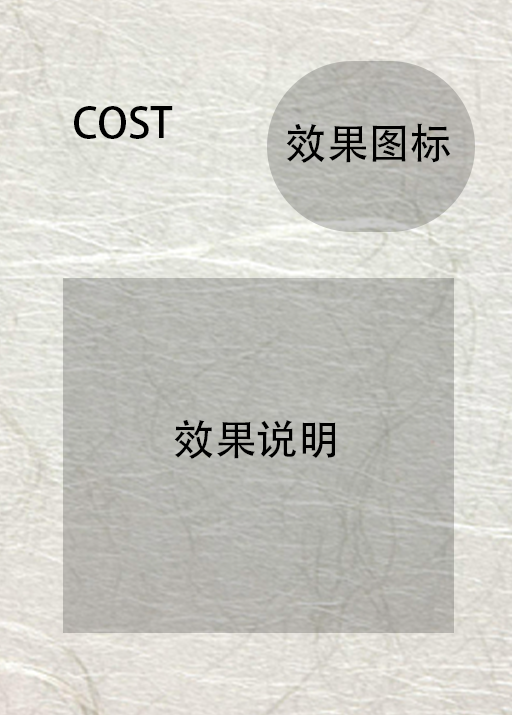
<style>
.page{position:relative;width:512px;height:715px}
.page>*{position:absolute;margin:0}
.t1{font:41.7px "AdobeHeitiStd-Regular";color:#000000}
</style>
<div class="page">
<p class="t1" style="left:74px;top:106px;width:99px;height:33px">COST</p>
<p class="t1" style="left:286px;top:123px;width:165px;height:40px">效果图标</p>
<p class="t1" style="left:174px;top:420px;width:162px;height:39px">效果说明</p>
</div>
